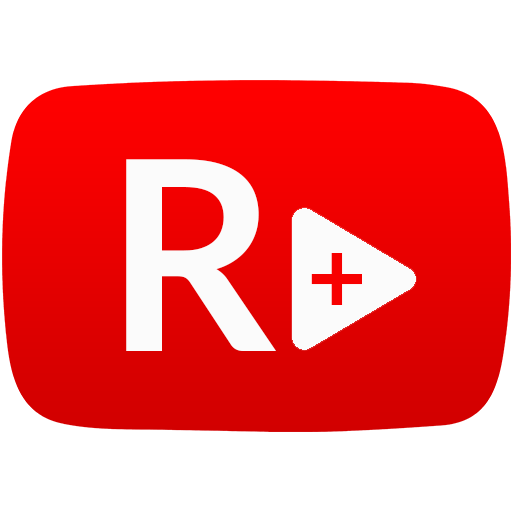
<style>
.page{position:relative;width:512px;height:512px;background:#ffffff}
.page>*{position:absolute;margin:0}
.t1{font:264.8px "Lato-Bold";color:#fbfbfb}
.t2{font:103.4px "Lato-Bold";color:#f70000}
</style>
<div class="page">
<p class="t1" style="left:126px;top:159px;width:150px;height:192px">R</p>
<p class="t2" style="left:311px;top:253px;width:51px;height:52px">+</p>
</div>
